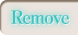
<style>
.page{position:relative;width:78px;height:36px;background:#ebe3dd}
.page>*{position:absolute;margin:0}
.t1{font:18px "RyuminPro-ExBold";letter-spacing:-0.08em;color:#3cc4c0}
</style>
<div class="page">
<p class="t1" style="left:11px;top:10px;width:58px;height:14px">Remove</p>
</div>
